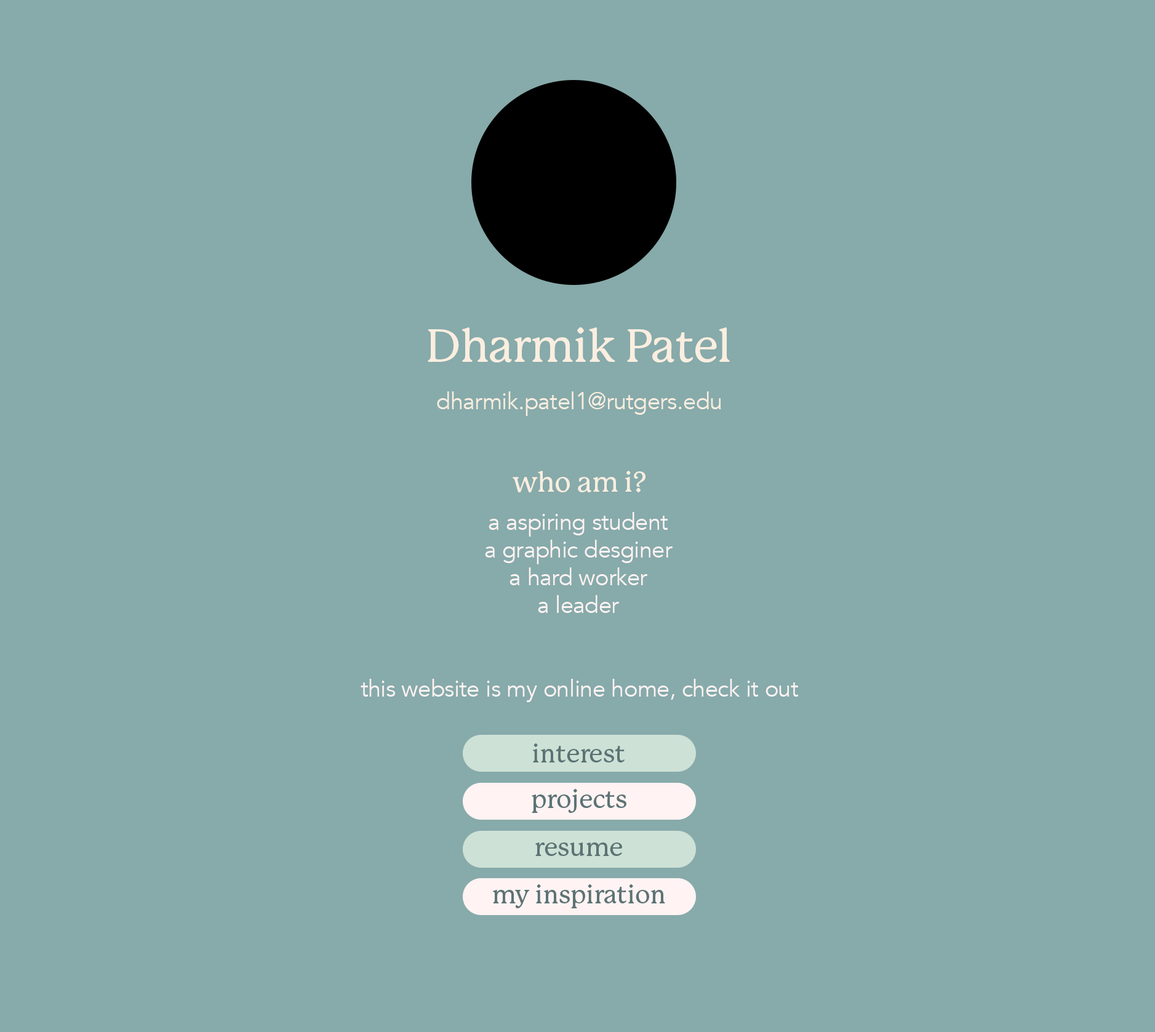
<style>
.page{position:relative;width:1155px;height:1032px;background:#87aaaa}
.page>*{position:absolute;margin:0}
.t1{font:46px "P22Mackinac-Medium";letter-spacing:-0.01em;color:#faeee0}
.t2{font:23.1px "Avenir-Book";letter-spacing:-0.01em;color:#faeee0}
.t3{font:28.2px "P22Mackinac-Medium";letter-spacing:-0.01em;color:#faeee0}
.t4{font:23.1px "Avenir-Book";letter-spacing:-0.01em;color:#fff3f3}
.t5{font:25.6px "P22Mackinac-Medium";letter-spacing:-0.01em;color:#5c7374}
</style>
<div class="page">
<p class="t1" style="left:428px;top:327px;width:302px;height:36px">Dharmik Patel</p>
<p class="t2" style="left:437px;top:391px;width:284px;height:25px">dharmik.patel1@rutgers.edu</p>
<p class="t3" style="left:513px;top:471px;width:133px;height:21px">who am i?</p>
<p class="t4" style="left:485px;top:512px;width:188px;height:101px;text-align:center">a aspiring student<br>a graphic desginer<br>a hard worker<br>a leader</p>
<p class="t4" style="left:361px;top:679px;width:438px;height:23px">this website is my online home, check it out</p>
<p class="t5" style="left:533px;top:744px;width:92px;height:19px">interest</p>
<p class="t5" style="left:532px;top:789px;width:95px;height:24px">projects</p>
<p class="t5" style="left:535px;top:843px;width:87px;height:13px">resume</p>
<p class="t5" style="left:493px;top:884px;width:172px;height:24px">my inspiration</p>
</div>
